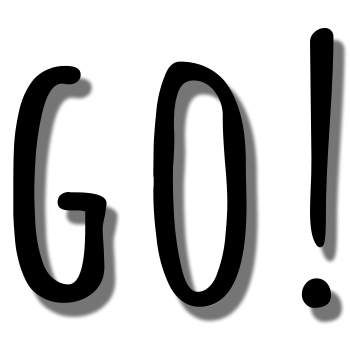
<style>
.page{position:relative;width:350px;height:350px;background:#ffffff}
.page>*{position:absolute;margin:0}
.t1{font:354.2px "AmaticSC-Bold";letter-spacing:0.05em;color:#000000}
</style>
<div class="page">
<p class="t1" style="left:13px;top:28px;width:321px;height:280px">go!</p>
</div>
